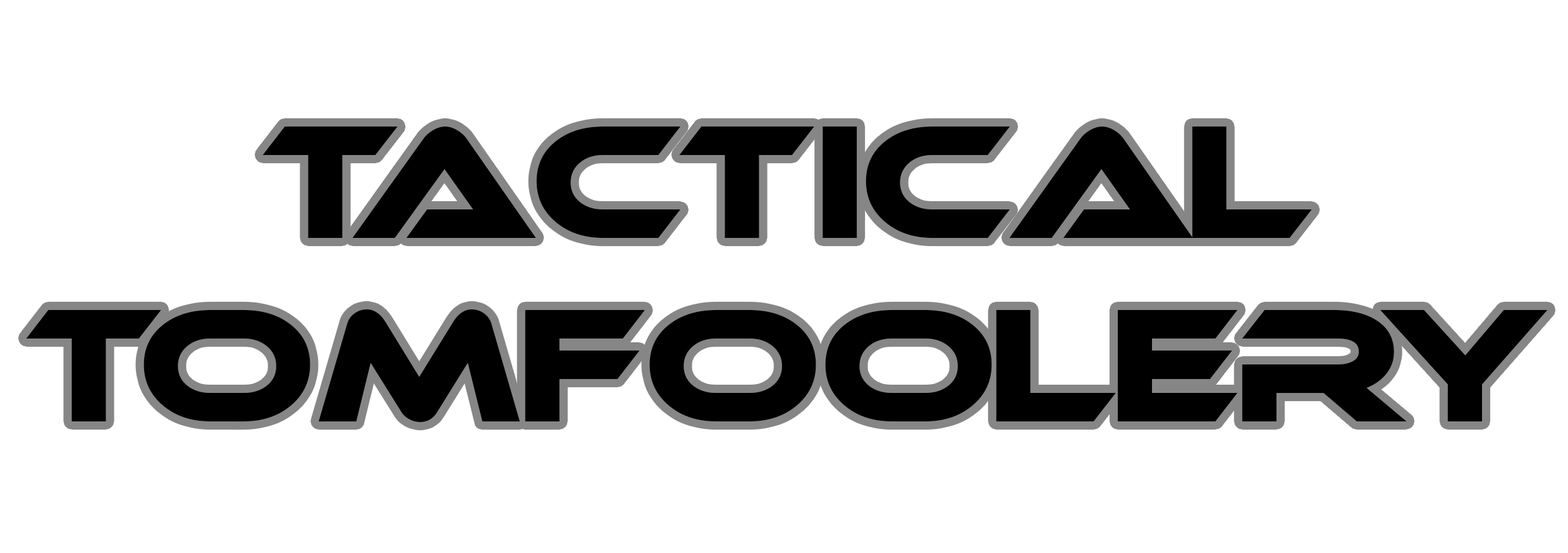
<style>
.page{position:relative;width:1568px;height:553px;background:#ffffff}
.page>*{position:absolute;margin:0}
.t1{font:152.8px "Ethnocentric";color:#000000}
</style>
<div class="page">
<p class="t1" style="left:26px;top:126px;width:1522px;height:296px;text-align:center">Tactical<br>Tomfoolery</p>
</div>
